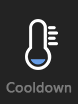
<style>
.page{position:relative;width:78px;height:104px;background:#232323}
.page>*{position:absolute;margin:0}
.t1{font:14px "SegoeUI";color:#7c7c7c;font-weight:bold}
</style>
<div class="page">
<p class="t1" style="left:6px;top:82px;width:66px;height:11px">Cooldown</p>
</div>
